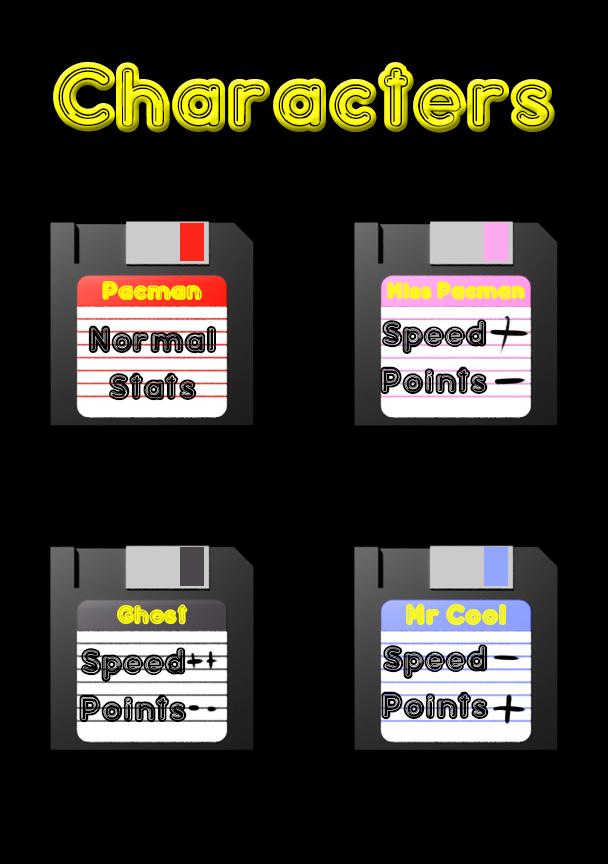
<style>
.page{position:relative;width:608px;height:864px;background:#000000}
.page>*{position:absolute;margin:0}
.t1{font:100px "Confarreatio-Regular"}
.t2{font:27.4px "Confarreatio-Regular";color:#fffc00}
.t3{font:24.3px "Confarreatio-Regular";color:#fffc00}
.t4{font:39px "Confarreatio-Regular";color:#000000}
.t5{font:39.1px "Confarreatio-Regular";color:#000000}
.t6{font:27.3px "Confarreatio-Regular";color:#fffc00}
.t7{font:29.9px "Confarreatio-Regular";color:#fffc00}
</style>
<div class="page">
<p class="t1" style="left:53px;top:62px;width:502px;height:71px">Characters</p>
<p class="t2" style="left:102px;top:281px;width:100px;height:20px">Pacman</p>
<p class="t3" style="left:387px;top:281px;width:138px;height:19px">Miss Pacman</p>
<p class="t4" style="left:88px;top:325px;width:129px;height:76px;text-align:center">Normal<br>Stats</p>
<p class="t5" style="left:380px;top:319px;width:108px;height:76px;text-align:center">Speed<br>Points</p>
<p class="t6" style="left:117px;top:604px;width:71px;height:21px">Ghost</p>
<p class="t7" style="left:406px;top:603px;width:100px;height:23px">Mr Cool</p>
<p class="t5" style="left:79px;top:647px;width:108px;height:76px;text-align:center">Speed<br>Points</p>
<p class="t5" style="left:381px;top:644px;width:108px;height:76px;text-align:center">Speed<br>Points</p>
</div>
